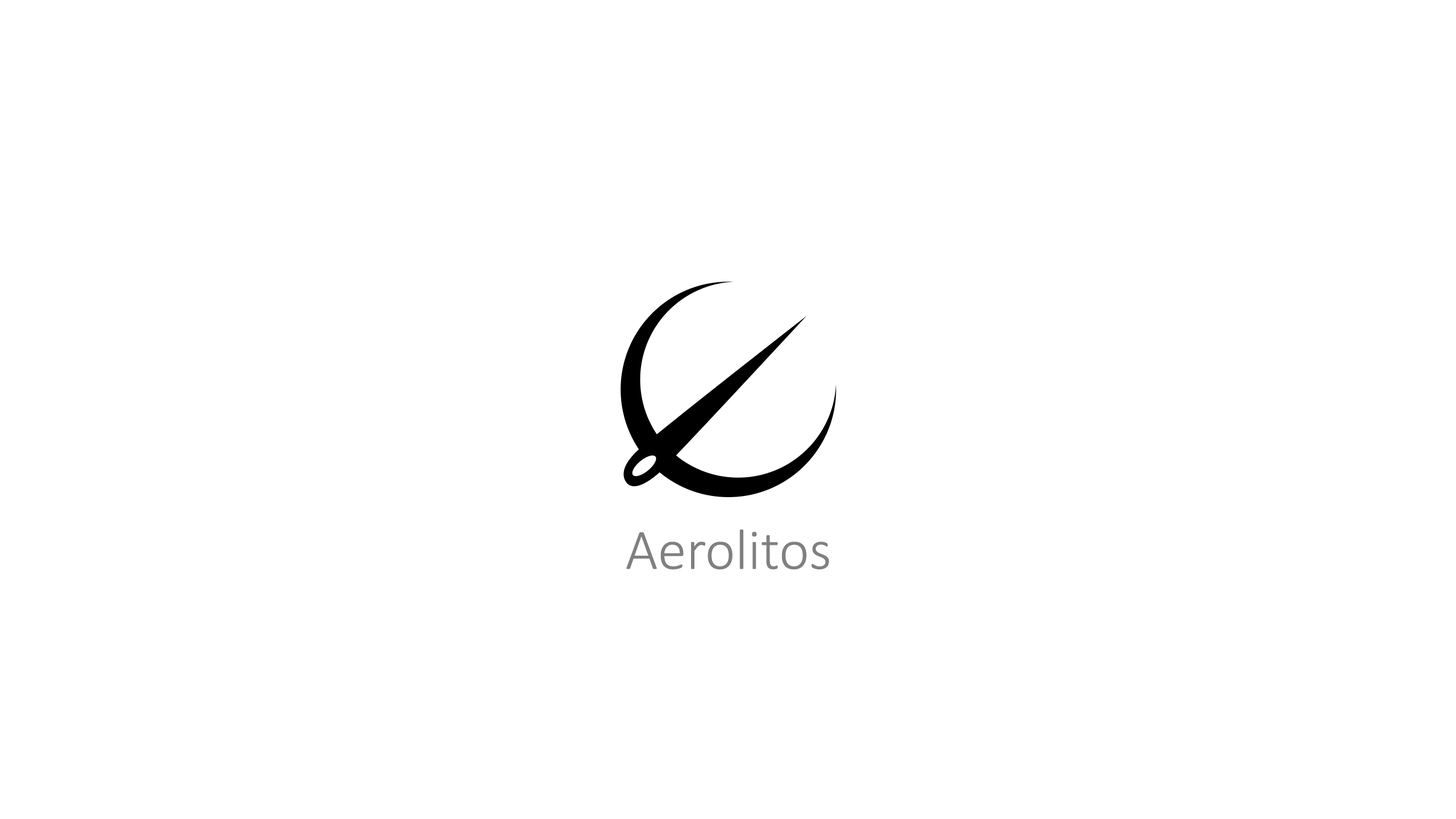
<style>
.page{position:relative;width:1456px;height:819px;background:#ffffff}
.page>*{position:absolute;margin:0}
.t1{font:57.7px "Calibri-Light";color:#808080}
</style>
<div class="page">
<p class="t1" style="left:626px;top:529px;width:203px;height:41px">Aerolitos</p>
</div>
